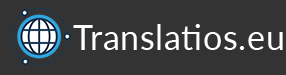
<style>
.page{position:relative;width:286px;height:75px;background:#333333}
.page>*{position:absolute;margin:0}
.t1{font:34px "Lato-Regular";letter-spacing:0.02em;color:#ffffff}
</style>
<div class="page">
<p class="t1" style="left:73px;top:24px;width:210px;height:26px">Translatios.eu</p>
</div>
